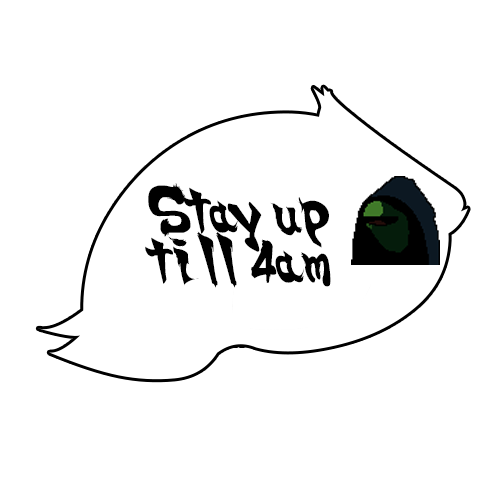
<style>
.page{position:relative;width:500px;height:500px;background:#ffffff}
.page>*{position:absolute;margin:0}
.t1{font:41.7px "SSF4-ABUKET-Regular";color:#000000;scale:0.94 1}
</style>
<div class="page">
<p class="t1" style="left:145px;top:183px;width:186px;height:105px;text-align:right">Stay up <br>till 4am</p>
</div>
